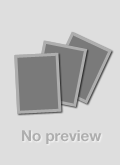
<style>
.page{position:relative;width:120px;height:165px;background:#dedede}
.page>*{position:absolute;margin:0}
.t1{font:15px "HelveticaNeue-Bold";color:#aeaeae}
</style>
<div class="page">
<p class="t1" style="left:22px;top:130px;width:80px;height:14px">No preview</p>
</div>
